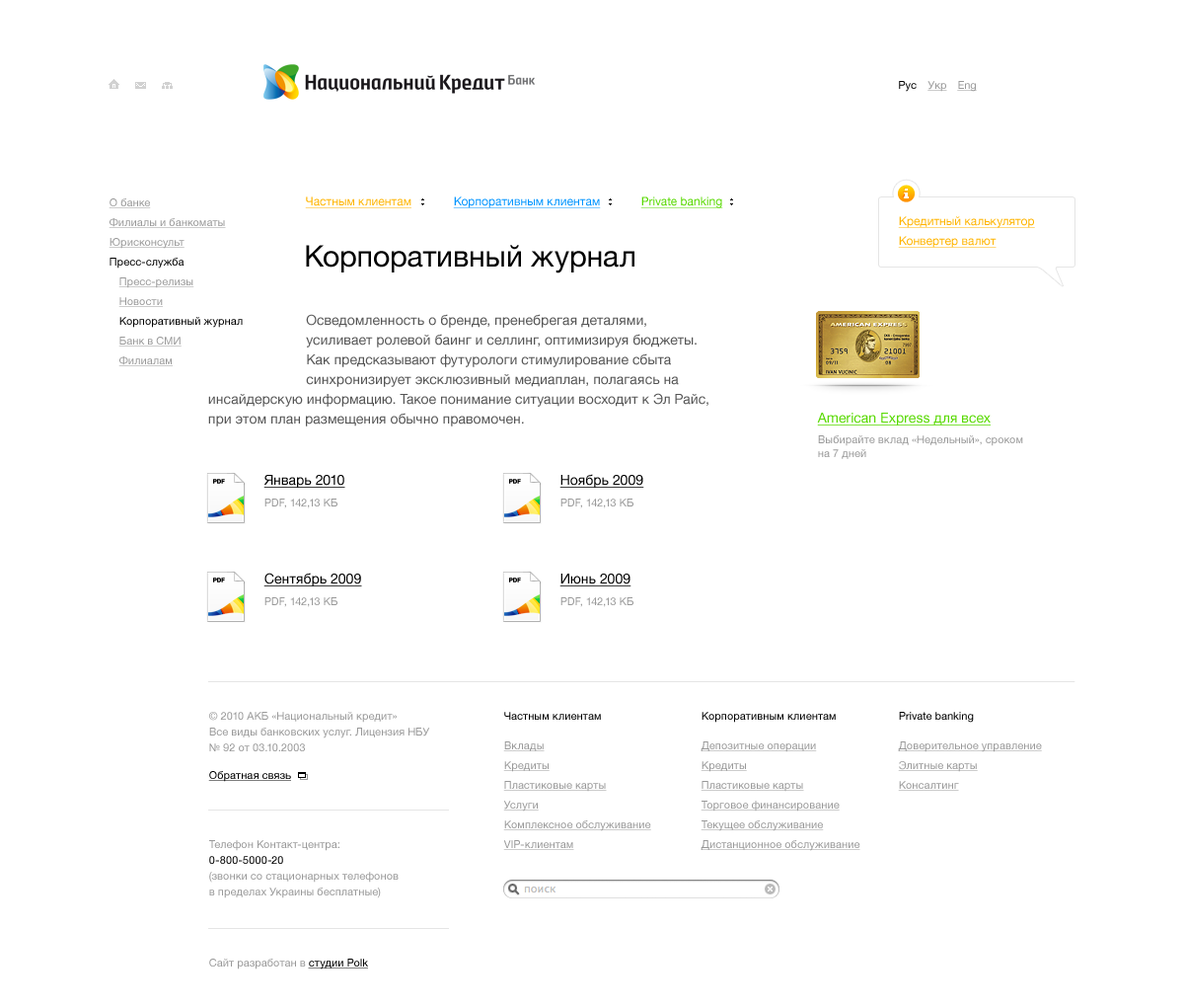
<style>
.page{position:relative;width:1184px;height:1007px;background:#ffffff}
.page>*{position:absolute;margin:0}
.t1{font:10.9px "HelveticaNeue";color:#000000}
.t2{font:10.9px "HelveticaNeue";color:#999999;text-decoration:underline}
.t3{font:11.8px "HelveticaNeue";color:#ffb400;text-decoration:underline}
.t4{font:11.8px "HelveticaNeue";color:#0094ff;text-decoration:underline}
.t5{font:11.8px "HelveticaNeue";color:#57d900;text-decoration:underline}
.t6{font:29.6px "HelveticaNeue";color:#000000}
.t7{font:13.8px/19.7px "HelveticaNeue";color:#555555}
.t8{font:13.8px "HelveticaNeue";color:#57d900;text-decoration:underline}
.t9{font:10.9px "HelveticaNeue";color:#999999}
.t10{font:13.8px "HelveticaNeue";color:#000000;text-decoration:underline}
.t11{font:5.9px "HelveticaNeue-Bold";color:#000000;text-transform:uppercase}
.t12{font:10.9px/15.8px "HelveticaNeue";color:#999999}
.t13{font:10.9px "HelveticaNeue";color:#000000;text-decoration:underline}
.t14{font:10.9px/15.8px "HelveticaNeue";color:#010101}
</style>
<div class="page">
<p class="t1" style="left:899px;top:81px;width:18px;height:11px">Рус</p>
<p class="t2" style="left:928px;top:81px;width:20px;height:11px">Укр</p>
<p class="t2" style="left:957px;top:81px;width:20px;height:11px">Eng</p>
<p class="t3" style="left:305px;top:196px;width:107px;height:12px">Частным клиентам</p>
<p class="t4" style="left:453px;top:196px;width:148px;height:12px">Корпоративным клиентам</p>
<p class="t5" style="left:641px;top:196px;width:82px;height:12px">Private banking</p>
<p class="t2" style="left:109px;top:198px;width:42px;height:10px">О банке</p>
<p class="t2" style="left:109px;top:218px;width:117px;height:10px">Филиалы и банкоматы</p>
<p class="t3" style="left:898px;top:216px;width:137px;height:12px">Кредитный калькулятор</p>
<p class="t2" style="left:109px;top:238px;width:76px;height:11px">Юрисконсульт</p>
<p class="t6" style="left:306px;top:245px;width:329px;height:28px">Корпоративный журнал</p>
<p class="t3" style="left:898px;top:236px;width:99px;height:12px">Конвертер валют</p>
<p class="t1" style="left:110px;top:258px;width:75px;height:10px">Пресс-служба</p>
<p class="t2" style="left:118px;top:277px;width:76px;height:11px">Пресс-релизы</p>
<p class="t2" style="left:118px;top:297px;width:45px;height:10px">Новости</p>
<p class="t1" style="left:119px;top:317px;width:124px;height:11px">Корпоративный журнал</p>
<p class="t7" style="left:208px;top:314px;width:501px;height:112px">Осведомленность о бренде, пренебрегая деталями, <br>      усиливает ролевой баинг и селлинг, оптимизируя бюджеты.<br>      Как предсказывают футурологи стимулирование сбыта <br>      синхронизирует эксклюзивный медиаплан, полагаясь на инсайдерскую информацию. Такое понимание ситуации восходит к Эл Райс, при этом план размещения обычно правомочен.</p>
<p class="t2" style="left:118px;top:337px;width:64px;height:9px">Банк в СМИ</p>
<p class="t2" style="left:118px;top:356px;width:55px;height:10px">Филиалам</p>
<p class="t8" style="left:817px;top:413px;width:174px;height:12px">American Express для всех</p>
<p class="t9" style="left:818px;top:435px;width:206px;height:24px">Выбирайте вклад «Недельный», сроком<br>на 7 дней</p>
<p class="t10" style="left:560px;top:474px;width:85px;height:14px">Ноябрь 2009</p>
<p class="t11" style="left:213px;top:479px;width:12px;height:5px">Pdf</p>
<p class="t10" style="left:264px;top:475px;width:81px;height:13px">Январь 2010</p>
<p class="t11" style="left:509px;top:479px;width:12px;height:5px">Pdf</p>
<p class="t9" style="left:265px;top:498px;width:73px;height:10px">PDF, 142,13 КБ</p>
<p class="t9" style="left:561px;top:498px;width:73px;height:10px">PDF, 142,13 КБ</p>
<p class="t11" style="left:213px;top:577px;width:12px;height:5px">Pdf</p>
<p class="t10" style="left:264px;top:572px;width:98px;height:14px">Сентябрь 2009</p>
<p class="t11" style="left:509px;top:577px;width:12px;height:5px">Pdf</p>
<p class="t10" style="left:560px;top:573px;width:72px;height:13px">Июнь 2009</p>
<p class="t9" style="left:265px;top:597px;width:73px;height:10px">PDF, 142,13 КБ</p>
<p class="t9" style="left:561px;top:597px;width:73px;height:10px">PDF, 142,13 КБ</p>
<p class="t12" style="left:209px;top:712px;width:221px;height:39px">© 2010 АКБ «Национальный кредит»<br>Все виды банковских услуг. Лицензия НБУ<br>№ 92 от 03.10.2003</p>
<p class="t1" style="left:504px;top:712px;width:97px;height:8px">Частным клиентам</p>
<p class="t1" style="left:702px;top:712px;width:134px;height:10px">Корпоративным клиентам</p>
<p class="t1" style="left:899px;top:712px;width:75px;height:10px">Private banking</p>
<p class="t2" style="left:503px;top:741px;width:42px;height:10px">Вклады</p>
<p class="t2" style="left:701px;top:741px;width:116px;height:11px">Депозитные операции</p>
<p class="t2" style="left:898px;top:741px;width:144px;height:11px">Доверительное управление</p>
<p class="t2" style="left:503px;top:761px;width:47px;height:11px">Кредиты</p>
<p class="t2" style="left:701px;top:761px;width:46px;height:11px">Кредиты</p>
<p class="t2" style="left:898px;top:761px;width:80px;height:11px">Элитные карты</p>
<p class="t13" style="left:208px;top:771px;width:83px;height:11px">Обратная связь</p>
<p class="t2" style="left:503px;top:781px;width:104px;height:11px">Пластиковые карты</p>
<p class="t2" style="left:701px;top:781px;width:103px;height:11px">Пластиковые карты</p>
<p class="t2" style="left:898px;top:781px;width:61px;height:10px">Консалтинг</p>
<p class="t2" style="left:503px;top:800px;width:36px;height:11px">Услуги</p>
<p class="t2" style="left:701px;top:800px;width:139px;height:11px">Торговое финансирование</p>
<p class="t2" style="left:503px;top:820px;width:148px;height:11px">Комплексное обслуживание</p>
<p class="t2" style="left:701px;top:820px;width:123px;height:11px">Текущее обслуживание</p>
<p class="t12" style="left:209px;top:840px;width:190px;height:58px">Телефон Контакт-центра:<br><span class="t14">0-800-5000-20<br></span>(звонки со стационарных телефонов<br>в пределах Украины бесплатные)</p>
<p class="t2" style="left:503px;top:840px;width:71px;height:10px">VIP-клиентам</p>
<p class="t2" style="left:701px;top:840px;width:160px;height:11px">Дистанционное обслуживание</p>
<p class="t9" style="left:209px;top:958px;width:159px;height:11px">Сайт разработан в <span class="t13">студии Polk</span></p>
</div>
